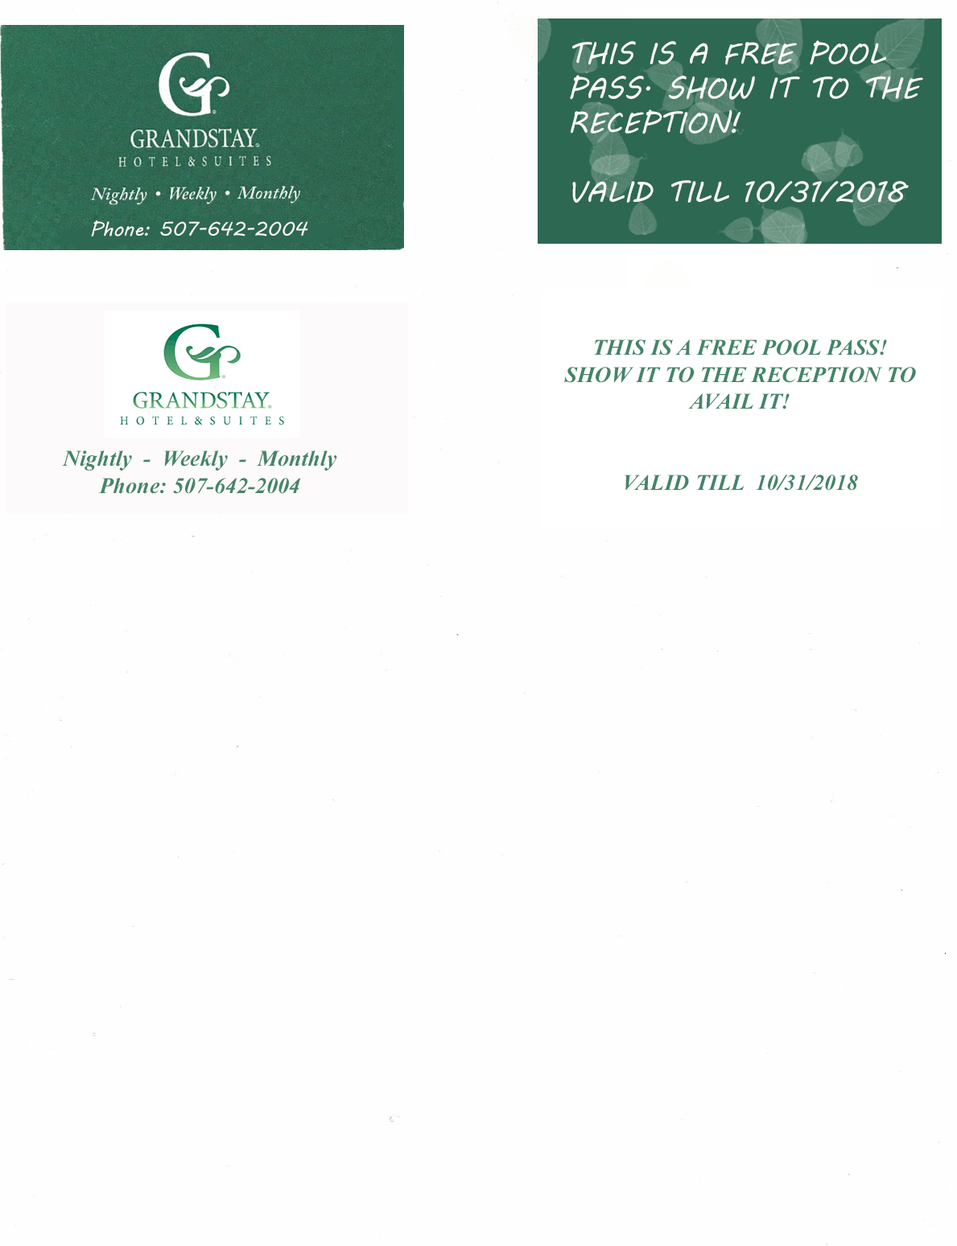
<style>
.page{position:relative;width:957px;height:1246px;background:#fefefe}
.page>*{position:absolute;margin:0}
.t1{font:29px "MVBoli";color:#fcfafa}
.t2{font:19.3px "MVBoli";color:#fcfafa}
.t3{font:22.5px "TimesNewRomanPS-BoldItalicMT";color:#438569}
</style>
<div class="page">
<p class="t1" style="left:570px;top:40px;width:353px;height:163px">THIS IS A FREE POOL PASS. SHOW IT TO THE RECEPTION!<br><br>VALID TILL 10/31/2018</p>
<p class="t2" style="left:91px;top:220px;width:217px;height:17px">Phone: 507-642-2004</p>
<p class="t3" style="left:564px;top:340px;width:352px;height:151px;text-align:center">THIS IS A FREE POOL PASS!<br>SHOW IT TO THE RECEPTION TO AVAIL IT!<br><br><br>VALID TILL  10/31/2018</p>
<p class="t3" style="left:62px;top:451px;width:275px;height:43px;text-align:center">Nightly  -  Weekly  -  Monthly<br>Phone: 507-642-2004</p>
</div>
